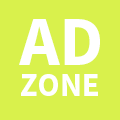
<style>
.page{position:relative;width:120px;height:120px;background:#d9f14c}
.page>*{position:absolute;margin:0}
.t1{font:70px "SourceSansPro-Bold";color:#ffffff}
.t2{font:33px "SourceSansPro-Bold";color:#ffffff}
</style>
<div class="page">
<p class="t1" style="left:19px;top:19px;width:81px;height:46px">AD</p>
<p class="t2" style="left:21px;top:74px;width:77px;height:22px">ZONE</p>
</div>
